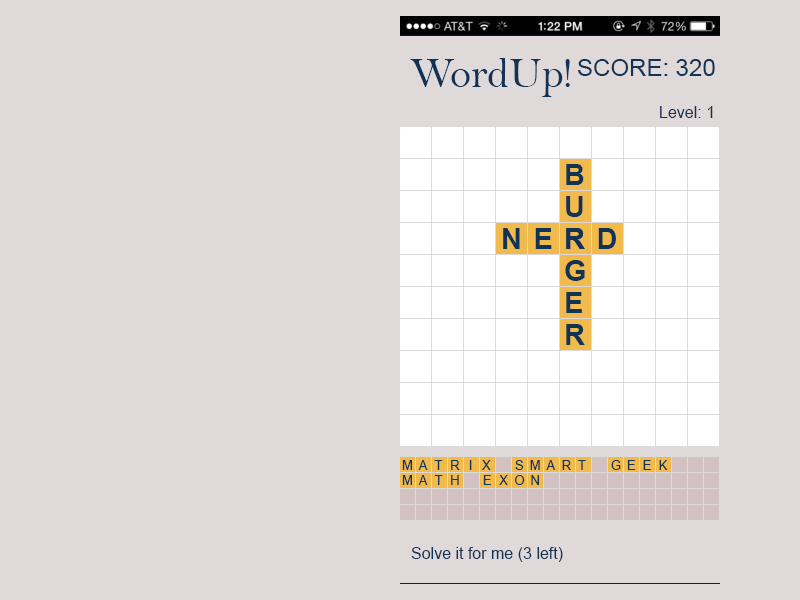
<style>
.page{position:relative;width:800px;height:600px;background:#e0d9d9}
.page>*{position:absolute;margin:0}
.t1{font:42.7px "BellMT";color:#113355}
.t2{font:24px "ArialMT";color:#113355}
.t3{font:12px "ArialMT";color:#113355}
.t4{font:29.3px/32px "Arial-BoldMT";letter-spacing:0.38em;color:#113355}
.t5{font:29.3px "Arial-BoldMT";letter-spacing:0.38em;color:#113355}
.t6{font:13px "ArialMT";letter-spacing:0.46em;color:#113355}
.t7{font:13px "ArialMT";letter-spacing:0.62em;color:#113355}
.t8{font:13px "ArialMT";letter-spacing:0.6em;color:#113355}
.t9{font:13px "ArialMT";letter-spacing:0.7em;color:#113355}
.t10{font:13px "ArialMT";letter-spacing:0.74em;color:#113355}
.t11{font:13px "ArialMT";letter-spacing:0.38em;color:#113355}
.t12{font:13px "ArialMT";letter-spacing:0.5em;color:#113355}
.t13{font:13px "ArialMT";letter-spacing:0.56em;color:#113355}
.t14{font:13px "ArialMT";letter-spacing:0.54em;color:#113355}
.t15{font:13px "ArialMT";letter-spacing:0.64em;color:#113355}
.t16{font:13px "ArialMT";letter-spacing:0.58em;color:#113355}
.t17{font:16px "ArialMT";color:#113355}
</style>
<div class="page">
<p class="t1" style="left:410px;top:58px;width:160px;height:39px">WordUp!</p>
<p class="t2" style="left:578px;top:59px;width:137px;height:17px">SCORE: 320</p>
<p class="t3" style="left:660px;top:106px;width:53px;height:12px">Level: 1</p>
<p class="t4" style="left:565px;top:164px;width:20px;height:181px">B<br>U<br>R<br>G<br>E<br>R</p>
<p class="t5" style="left:503px;top:228px;width:113px;height:21px">NERD</p>
<p class="t6" style="left:402px;top:460px;width:89px;height:10px">M<span class="t7">A</span><span class="t8">T</span><span class="t9">R</span><span class="t10">I</span><span class="t11">X</span></p>
<p class="t6" style="left:515px;top:460px;width:71px;height:10px">SM<span class="t12">A</span><span class="t13">R</span>T</p>
<p class="t6" style="left:611px;top:460px;width:57px;height:10px">G<span class="t14">E</span><span class="t13">E</span>K</p>
<p class="t6" style="left:402px;top:475px;width:57px;height:10px">M<span class="t15">A</span><span class="t16">T</span>H</p>
<p class="t6" style="left:483px;top:475px;width:56px;height:10px"><span class="t16">E</span><span class="t12">X</span>ON</p>
<p class="t17" style="left:411px;top:547px;width:152px;height:15px">Solve it for me (3 left)</p>
</div>
